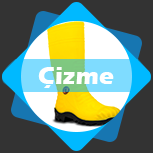
<style>
.page{position:relative;width:153px;height:153px;background:#333333}
.page>*{position:absolute;margin:0}
.t1{font:25px "ErasITC-Bold";color:#ffffff}
</style>
<div class="page">
<p class="t1" style="left:38px;top:67px;width:76px;height:21px">Çizme</p>
</div>
